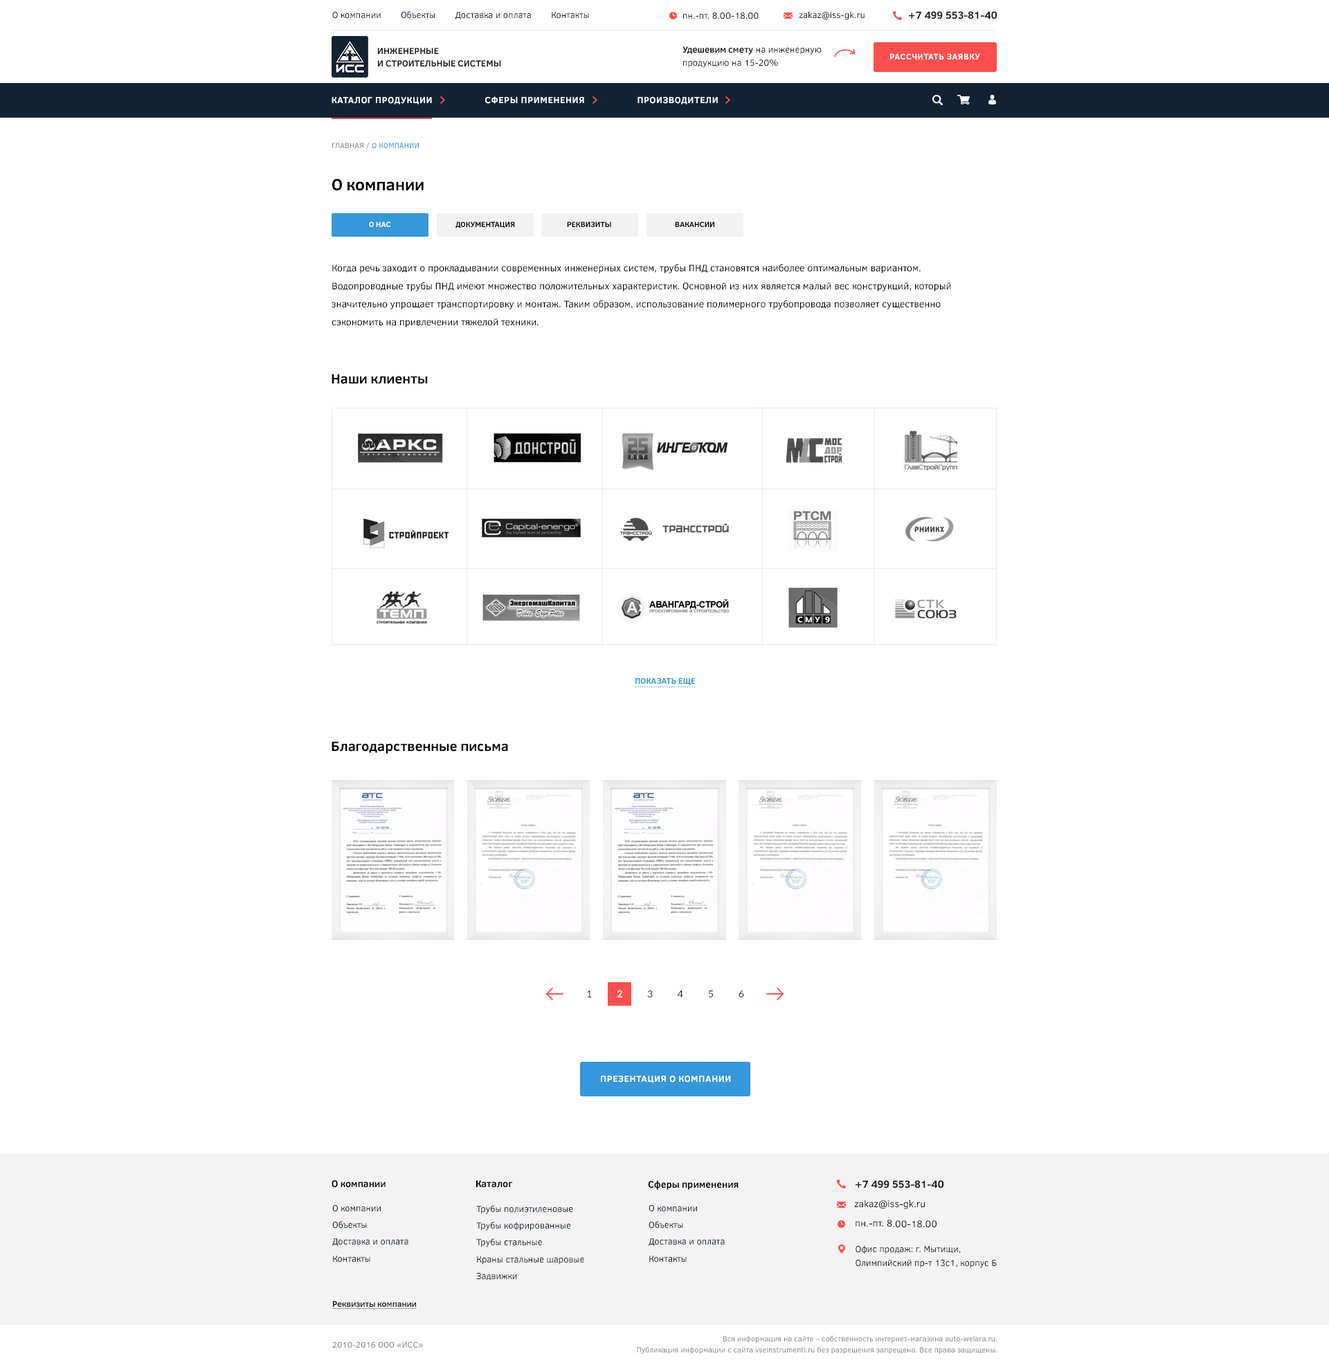
<style>
.page{position:relative;width:1329px;height:1367px;background:#ffffff}
.page>*{position:absolute;margin:0}
.t1{font:9px "ClearSans";color:#112232}
.t2{font:9px "ClearSans";color:#1e1e1e}
.t3{font:10.4px "ClearSans-Bold";color:#1e1e1e;text-transform:uppercase}
.t4{font:9px/9.7px "ClearSans-Bold";color:#1e1e1e}
.t5{font:9px/10.4px "ClearSans";color:#1e1e1e}
.t6{font:9px/10.4px "ClearSans-Bold";color:#1e1e1e}
.t7{font:8.3px "ClearSans-Bold";letter-spacing:0.05em;color:#ffffff;text-transform:uppercase}
.t8{font:9px "ClearSans-Bold";letter-spacing:0.05em;color:#ffffff;text-transform:uppercase}
.t9{font:7.6px "ClearSans";color:#3498db;text-transform:uppercase}
.t10{font:7.6px "ClearSans";color:#888888}
.t11{font:16.6px "ClearSans-Bold";color:#000000}
.t12{font:7.6px "ClearSans-Bold";color:#ffffff;text-transform:uppercase}
.t13{font:7.6px "ClearSans-Bold";color:#000000;text-transform:uppercase}
.t14{font:9.7px/18px "ClearSans";color:#000000}
.t15{font:13.8px "ClearSans-Bold";color:#000000}
.t16{font:8.3px "ClearSans-Bold";color:#3498db;text-transform:uppercase}
.t17{font:8.3px "ClearSans";color:#3498db;text-transform:uppercase}
.t18{font:9.7px "Lato-Regular";color:#222222}
.t19{font:9.7px "Lato-Bold";color:#ffffff}
.t20{font:9.7px "ClearSans-Bold";color:#000000}
.t21{font:9px/13.8px "ClearSans";color:#112232}
.t22{font:9.7px "ClearSans";color:#1e1e1e}
.t23{font:9px/13.8px "ClearSans";color:#1e1e1e}
.t24{font:8.3px "ClearSans-Bold";color:#1e1e1e;text-decoration:underline}
.t25{font:7.6px/8.3px "ClearSans";color:#858585}
.t26{font:8.3px "ClearSans";color:#858585}
</style>
<div class="page">
<p class="t1" style="left:332px;top:11px;width:257px;height:8px">О компании        Объекты        Доставка и оплата        Контакты</p>
<p class="t2" style="left:683px;top:12px;width:76px;height:7px">пн.-пт. 8.00-18.00</p>
<p class="t2" style="left:799px;top:11px;width:66px;height:9px">zakaz@iss-gk.ru</p>
<p class="t3" style="left:909px;top:11px;width:89px;height:8px">+7 499 553-81-40</p>
<p class="t4" style="left:378px;top:48px;width:123px;height:19px">ИНЖЕНЕРНЫЕ<br>И СТРОИТЕЛЬНЫЕ СИСТЕМЫ</p>
<p class="t5" style="left:683px;top:46px;width:139px;height:22px"><span class="t6">Удешевим смету</span> на инженерную<br>продукцию на 15-20%</p>
<p class="t7" style="left:890px;top:53px;width:90px;height:7px">рассчитать заявку</p>
<p class="t8" style="left:332px;top:96px;width:386px;height:9px">каталог продукции                    Сферы применения                    производители</p>
<p class="t9" style="left:332px;top:143px;width:87px;height:7px"><span class="t10">ГЛАВНАЯ / </span>о компании</p>
<p class="t11" style="left:332px;top:179px;width:92px;height:12px">О компании</p>
<p class="t12" style="left:369px;top:222px;width:22px;height:5px">о нас</p>
<p class="t13" style="left:456px;top:222px;width:59px;height:6px">документация</p>
<p class="t13" style="left:567px;top:222px;width:44px;height:5px">реквизиты</p>
<p class="t13" style="left:675px;top:222px;width:39px;height:5px">вакансии</p>
<p class="t14" style="left:332px;top:264px;width:619px;height:63px">Когда речь заходит о прокладывании современных инженерных систем, трубы ПНД становятся наиболее оптимальным вариантом. Водопроводные трубы ПНД имеют множество положительных характеристик. Основной из них является малый вес конструкций, который значительно упрощает транспортировку и монтаж. Таким образом, использование полимерного трубопровода позволяет существенно сэкономить на привлечении тяжелой техники.</p>
<p class="t15" style="left:332px;top:374px;width:96px;height:10px">Наши клиенты</p>
<p class="t16" style="left:636px;top:678px;width:59px;height:7px">ПОКАЗАТЬ ЕЩЕ</p>
<p class="t17" style="left:636px;top:686px;width:59px;height:1px">...........................</p>
<p class="t15" style="left:332px;top:741px;width:176px;height:13px">Благодарственные письма</p>
<p class="t18" style="left:587px;top:990px;width:157px;height:8px">1          <span class="t19">2 </span>         3          4          5          6</p>
<p class="t8" style="left:601px;top:1076px;width:130px;height:7px">Презентация о компании</p>
<p class="t20" style="left:332px;top:1180px;width:54px;height:8px">О компании</p>
<p class="t20" style="left:476px;top:1180px;width:37px;height:8px">Каталог</p>
<p class="t20" style="left:648px;top:1180px;width:91px;height:10px">Сферы применения</p>
<p class="t3" style="left:856px;top:1180px;width:88px;height:9px">+7 499 553-81-40</p>
<p class="t21" style="left:332px;top:1205px;width:76px;height:58px">О компании<br>Объекты<br>Доставка и оплата<br>Контакты</p>
<p class="t21" style="left:476px;top:1205px;width:108px;height:76px">Трубы полиэтиленовые<br>Трубы кофрированные<br>Трубы стальные<br>Краны стальные шаровые<br>Задвижки</p>
<p class="t21" style="left:649px;top:1205px;width:76px;height:58px">О компании<br>Объекты<br>Доставка и оплата<br>Контакты</p>
<p class="t22" style="left:854px;top:1200px;width:71px;height:9px">zakaz@iss-gk.ru</p>
<p class="t22" style="left:856px;top:1220px;width:81px;height:8px">пн.-пт. 8.00-18.00</p>
<p class="t23" style="left:856px;top:1245px;width:141px;height:23px">Офис продаж: г. Мытищи, Олимпийский пр-т 13с1, корпус Б</p>
<p class="t24" style="left:332px;top:1301px;width:85px;height:8px">Реквизиты компании</p>
<p class="t25" style="left:637px;top:1336px;width:360px;height:18px;text-align:right">Вся информация на сайте – собственность интернет-магазина auto-welara.ru.<br>Публикация информации с сайта vseinstrumenti.ru без разрешения запрещена. Все права защищены.</p>
<p class="t26" style="left:332px;top:1342px;width:91px;height:6px">2010-2016 ООО «ИСС»</p>
</div>
